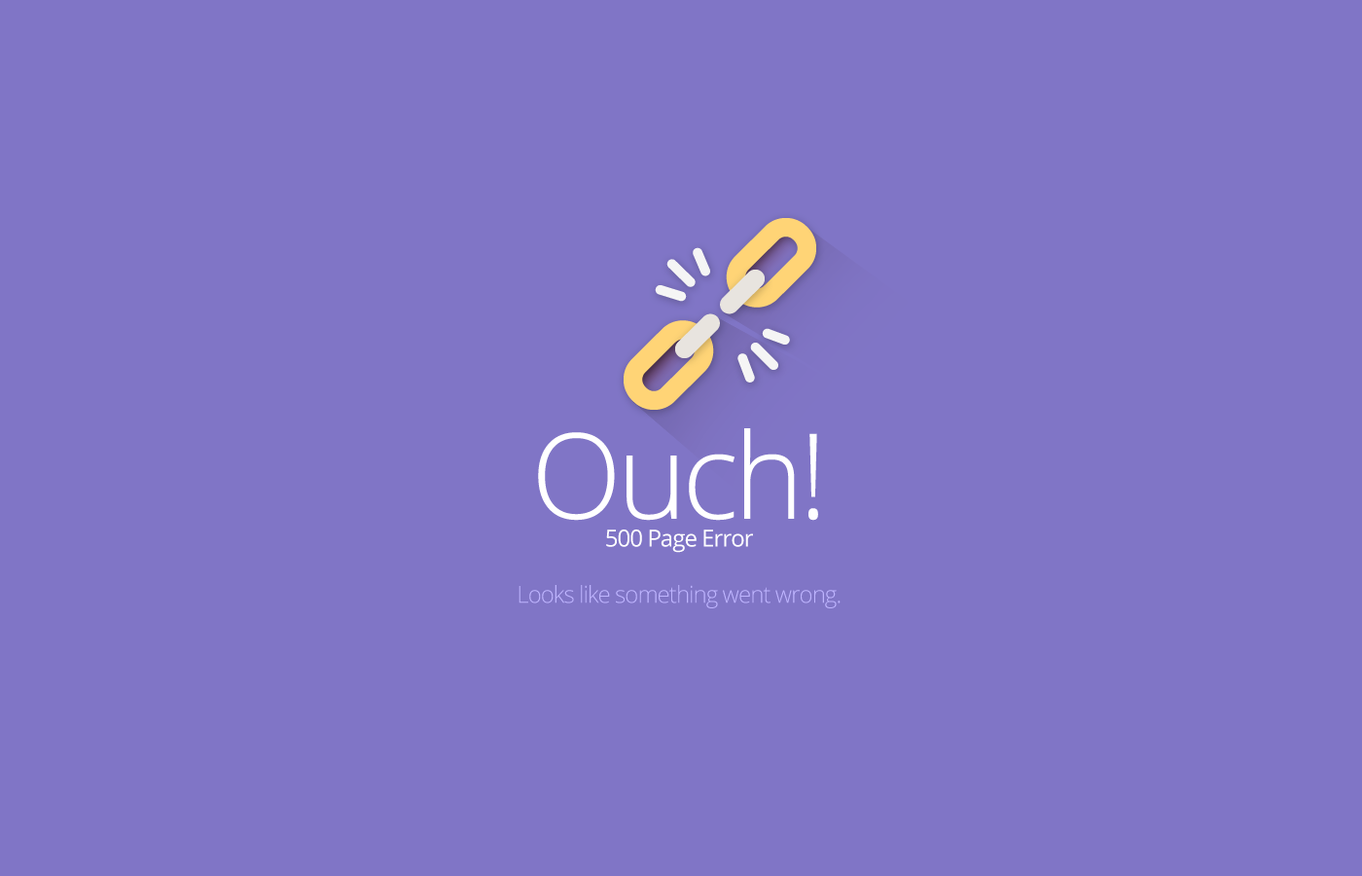
<style>
.page{position:relative;width:1362px;height:876px;background:#8075c6}
.page>*{position:absolute;margin:0}
.t1{font:23.3px "OpenSans-Light";letter-spacing:-0.04em;color:#bfb5ff}
.t2{font:118.7px "OpenSans-Light";letter-spacing:-0.04em;color:#ffffff}
.t3{font:23.3px "OpenSans";letter-spacing:-0.04em;color:#ffffff}
</style>
<div class="page">
<p class="t1" style="left:519px;top:428px;width:322px;height:180px;text-align:center"><span class="t2">Ouch!<br></span><span class="t3">500 Page Error<br><br></span>Looks like something went wrong.</p>
</div>
